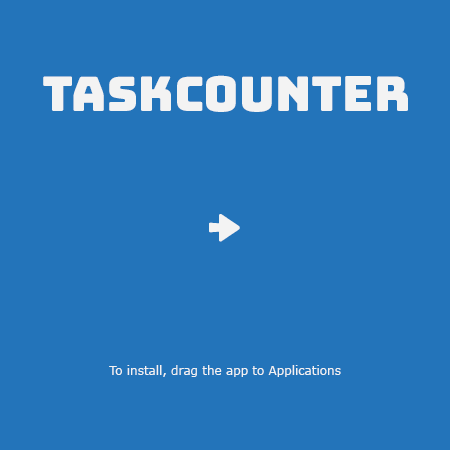
<style>
.page{position:relative;width:450px;height:450px;background:#2374ba}
.page>*{position:absolute;margin:0}
.t1{font:48px "Bungee-Regular";color:#f3f3f3}
.t2{font:12px "Verdana";color:#f3f3f3}
</style>
<div class="page">
<p class="t1" style="left:43px;top:75px;width:365px;height:37px">Taskcounter</p>
<p class="t1" style="left:209px;top:214px;width:31px;height:28px">→</p>
<p class="t2" style="left:109px;top:365px;width:232px;height:12px">To install, drag the app to Applications</p>
</div>
